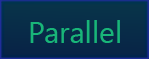
<style>
.page{position:relative;width:149px;height:59px}
.page>*{position:absolute;margin:0}
.t1{font:30px "SegoeUISymbol";color:#19b579}
</style>
<div class="page">
<p class="t1" style="left:30px;top:20px;width:90px;height:23px">Parallel</p>
</div>
